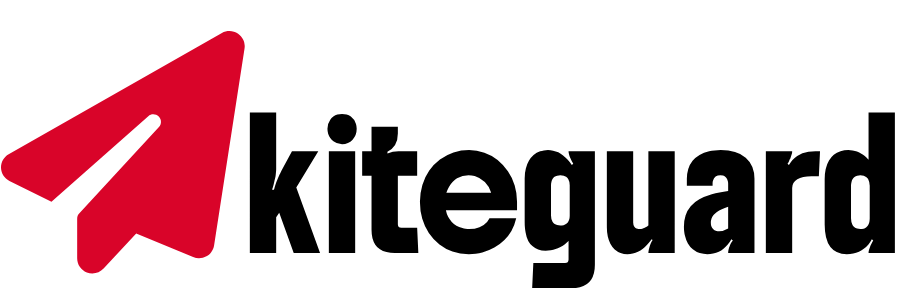
<style>
.page{position:relative;width:900px;height:300px;background:#ffffff}
.page>*{position:absolute;margin:0}
.t1{font:117px "Boldonse-Regular";color:#000000}
</style>
<div class="page">
<p class="t1" style="left:249px;top:112px;width:646px;height:177px">kiteguard</p>
</div>
